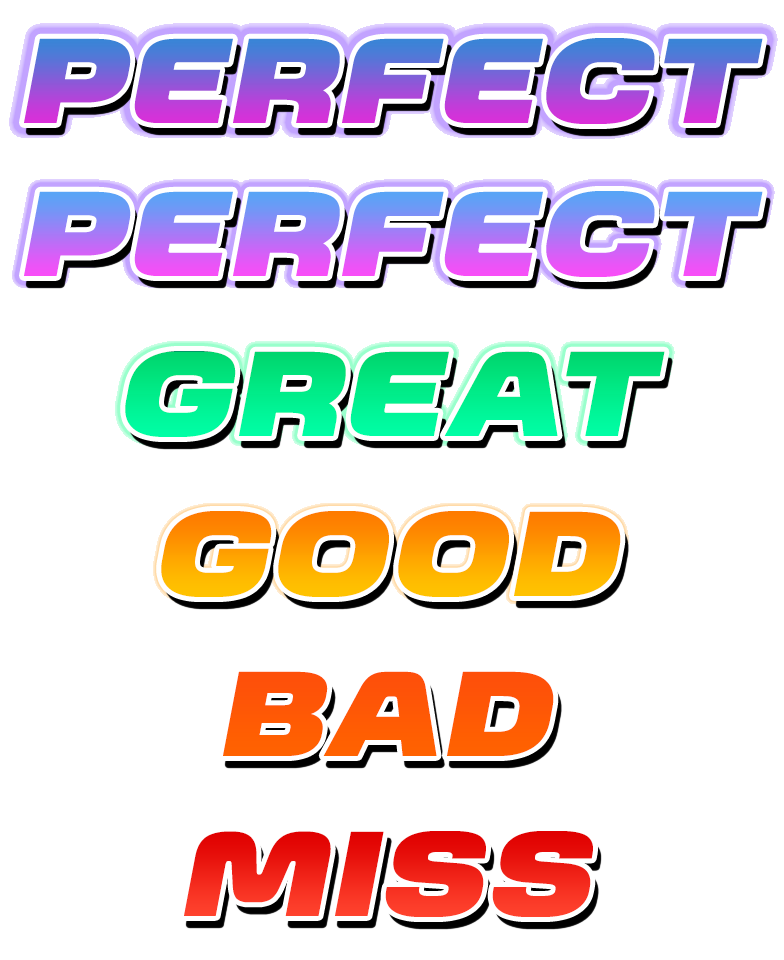
<style>
.page{position:relative;width:784px;height:960px;background:#ffffff}
.page>*{position:absolute;margin:0}
.t1{font:120px "Kinn-Black";letter-spacing:0.02em;font-style:italic;scale:1.08 1}
.t2{font:120px "Kinn-Black";letter-spacing:0.02em;color:#ff5905;font-style:italic;scale:1.08 1}
</style>
<div class="page">
<p class="t1" style="left:24px;top:38px;width:739px;height:86px">PERFECT</p>
<p class="t1" style="left:24px;top:191px;width:739px;height:86px">PERFECT</p>
<p class="t1" style="left:125px;top:351px;width:540px;height:86px">GREAT</p>
<p class="t1" style="left:161px;top:511px;width:460px;height:86px">GOOD</p>
<p class="t2" style="left:223px;top:671px;width:331px;height:85px">BAD</p>
<p class="t1" style="left:184px;top:831px;width:409px;height:86px">MISS</p>
</div>
